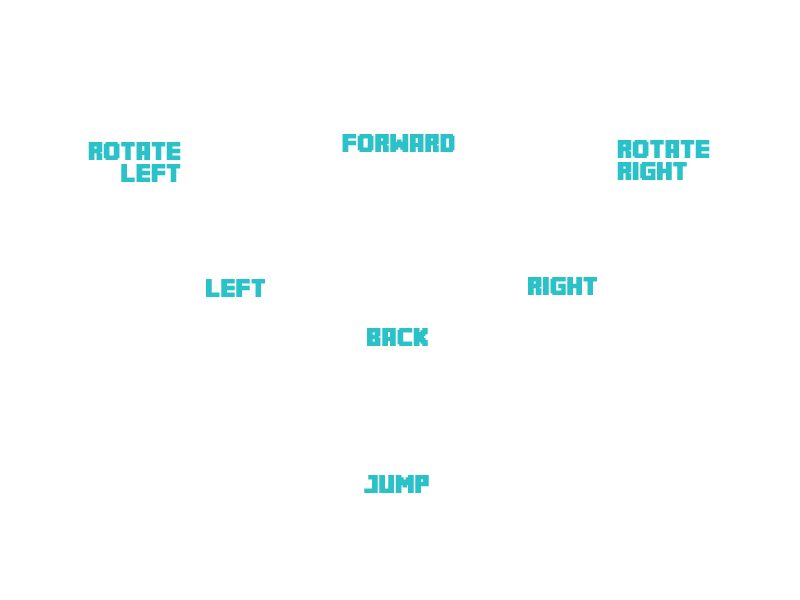
<style>
.page{position:relative;width:800px;height:600px;background:#ffffff}
.page>*{position:absolute;margin:0}
.t1{font:18px "MineCrafter-3";color:#2ac2c8}
</style>
<div class="page">
<p class="t1" style="left:342px;top:134px;width:113px;height:18px">forward</p>
<p class="t1" style="left:88px;top:142px;width:93px;height:40px;text-align:right">rotate<br>left</p>
<p class="t1" style="left:617px;top:140px;width:93px;height:40px">rotate<br>right</p>
<p class="t1" style="left:206px;top:279px;width:59px;height:18px">left</p>
<p class="t1" style="left:528px;top:277px;width:69px;height:18px">right</p>
<p class="t1" style="left:367px;top:328px;width:61px;height:18px">back</p>
<p class="t1" style="left:364px;top:475px;width:65px;height:18px">jump</p>
</div>
